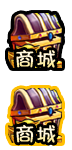
<style>
.page{position:relative;width:72px;height:150px;background:#ffffff}
.page>*{position:absolute;margin:0}
.t1{font:20px "DFPShaoNvW5";letter-spacing:0.025em;font-weight:bold}
</style>
<div class="page">
<p class="t1" style="left:16px;top:50px;width:40px;height:18px">商城</p>
<p class="t1" style="left:16px;top:125px;width:40px;height:18px">商城</p>
</div>
